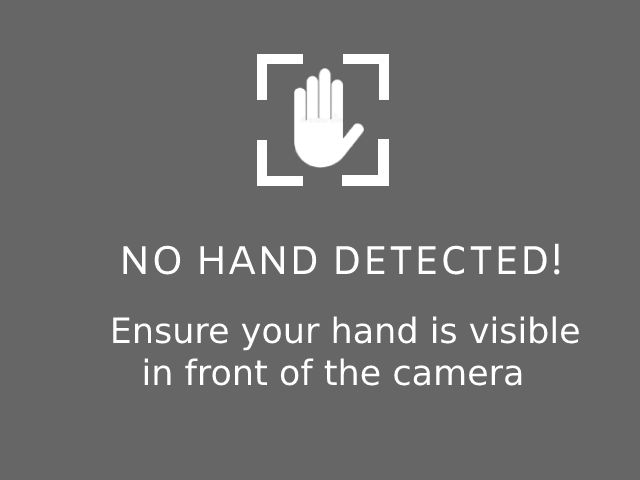
<style>
.page{position:relative;width:640px;height:480px;background:#666666}
.page>*{position:absolute;margin:0}
.t1{font:40px "Amiko-Regular";color:#ffffff}
.t2{font:35px "DejaVuSans";color:#ffffff}
.t3{font:40px "DejaVuSans";color:#ffffff}
</style>
<div class="page">
<p class="t1" style="left:123px;top:243px;width:437px;height:32px">NO HAND DETECTED!</p>
<p class="t2" style="left:113px;top:316px;width:466px;height:70px"><span class="t3"> </span>Ensure your hand is visible<br>    in front of the camera</p>
</div>
